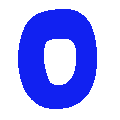
<style>
.page{position:relative;width:120px;height:120px;background:#ffffff}
.page>*{position:absolute;margin:0}
.t1{font:141.3px "Cushy";letter-spacing:0.2em;color:#1121f1}
</style>
<div class="page">
<p class="t1" style="left:18px;top:9px;width:79px;height:100px">0</p>
</div>
